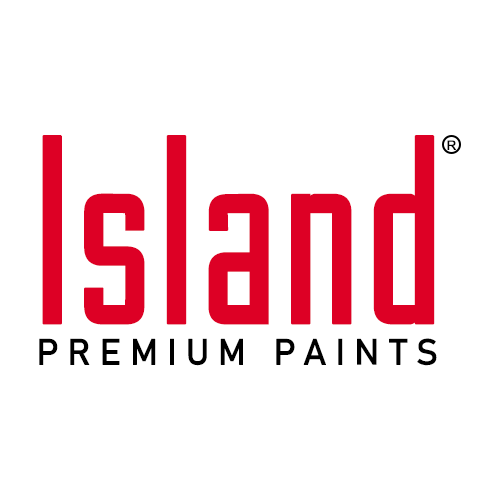
<style>
.page{position:relative;width:500px;height:500px;background:#ffffff}
.page>*{position:absolute;margin:0}
.t1{font:240px "GothamNights";color:#dd0025;font-weight:bold}
.t2{font:13.1px "ArialMT";color:#000000;text-transform:uppercase;font-weight:bold}
.t3{font:36px "Bahnschrift";letter-spacing:0.22em;color:#000000;text-transform:uppercase;font-weight:bold}
</style>
<div class="page">
<p class="t1" style="left:42px;top:135px;width:393px;height:190px">Island</p>
<p class="t2" style="left:447px;top:140px;width:9px;height:10px">r</p>
<p class="t3" style="left:39px;top:338px;width:398px;height:28px">premium paints</p>
</div>
